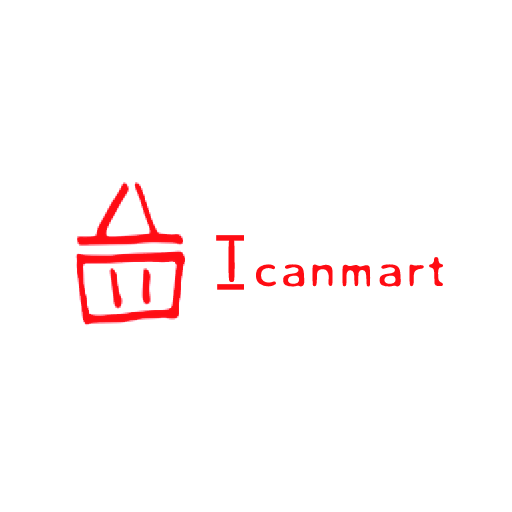
<style>
.page{position:relative;width:512px;height:512px;background:#ffffff}
.page>*{position:absolute;margin:0}
.t1{font:72px "YDIGurmL";color:#ff0c13}
.t2{font:48px "YDIGurmL";color:#ff0c13}
</style>
<div class="page">
<p class="t1" style="left:228px;top:238px;width:7px;height:45px">I</p>
<p class="t2" style="left:255px;top:256px;width:189px;height:31px">canmart</p>
</div>
